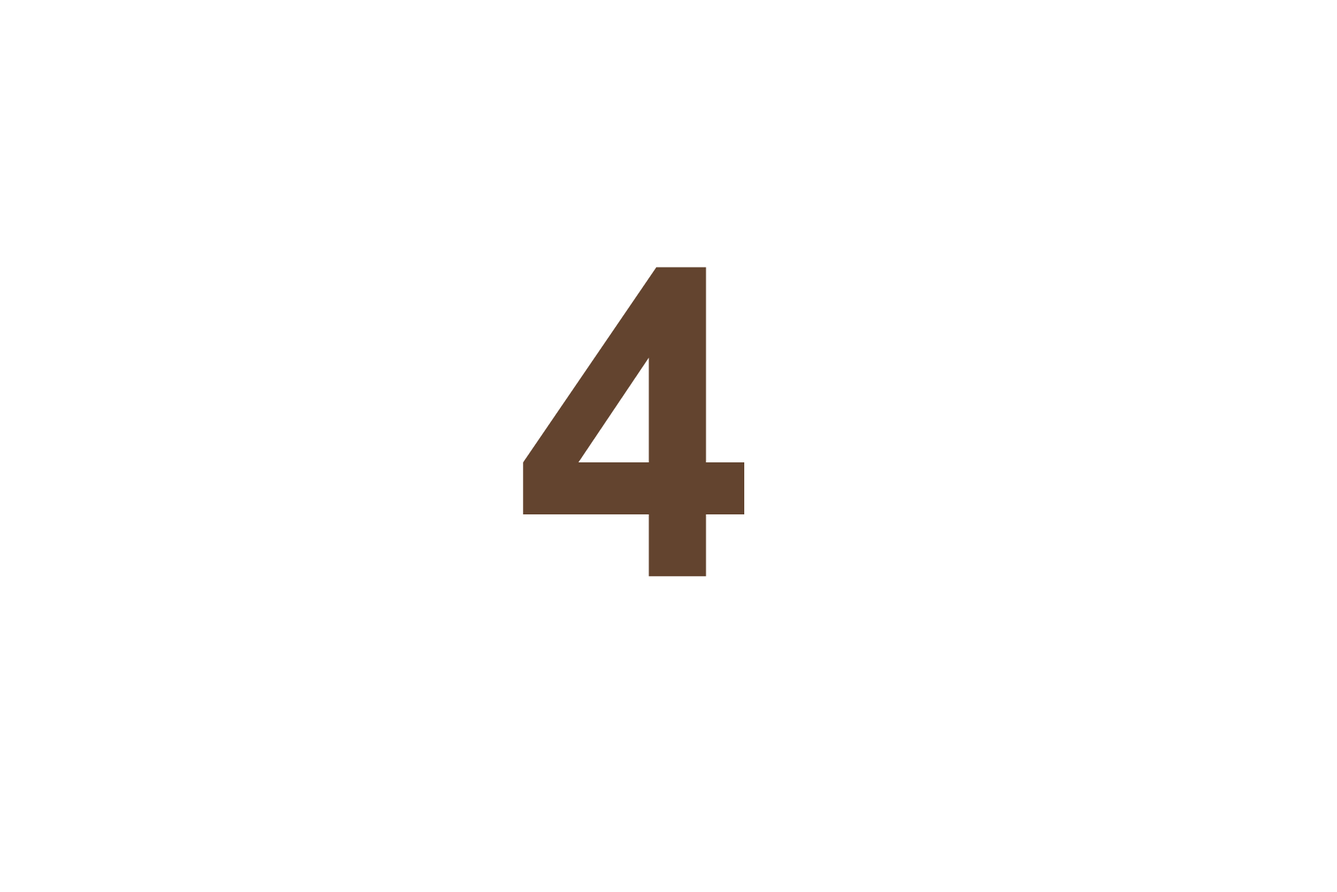
<style>
.page{position:relative;width:1337px;height:892px;background:#ffffff}
.page>*{position:absolute;margin:0}
.t1{font:429.6px "Arial-BoldMT";color:#63442f}
</style>
<div class="page">
<p class="t1" style="left:523px;top:267px;width:221px;height:310px">4</p>
</div>
